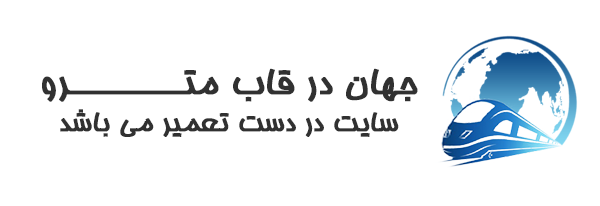
<style>
.page{position:relative;width:600px;height:206px;background:#ffffff}
.page>*{position:absolute;margin:0}
.t1{font:40px "Homa";color:#313131;font-weight:bold}
.t2{font:30px "Homa";color:#313131;font-weight:bold}
</style>
<div class="page">
<p class="t1" style="left:42px;top:68px;width:376px;height:34px">جهان در قاب متـــــــــرو</p>
<p class="t2" style="left:60px;top:109px;width:339px;height:28px">سایت در دست تعمیر می باشد</p>
</div>
